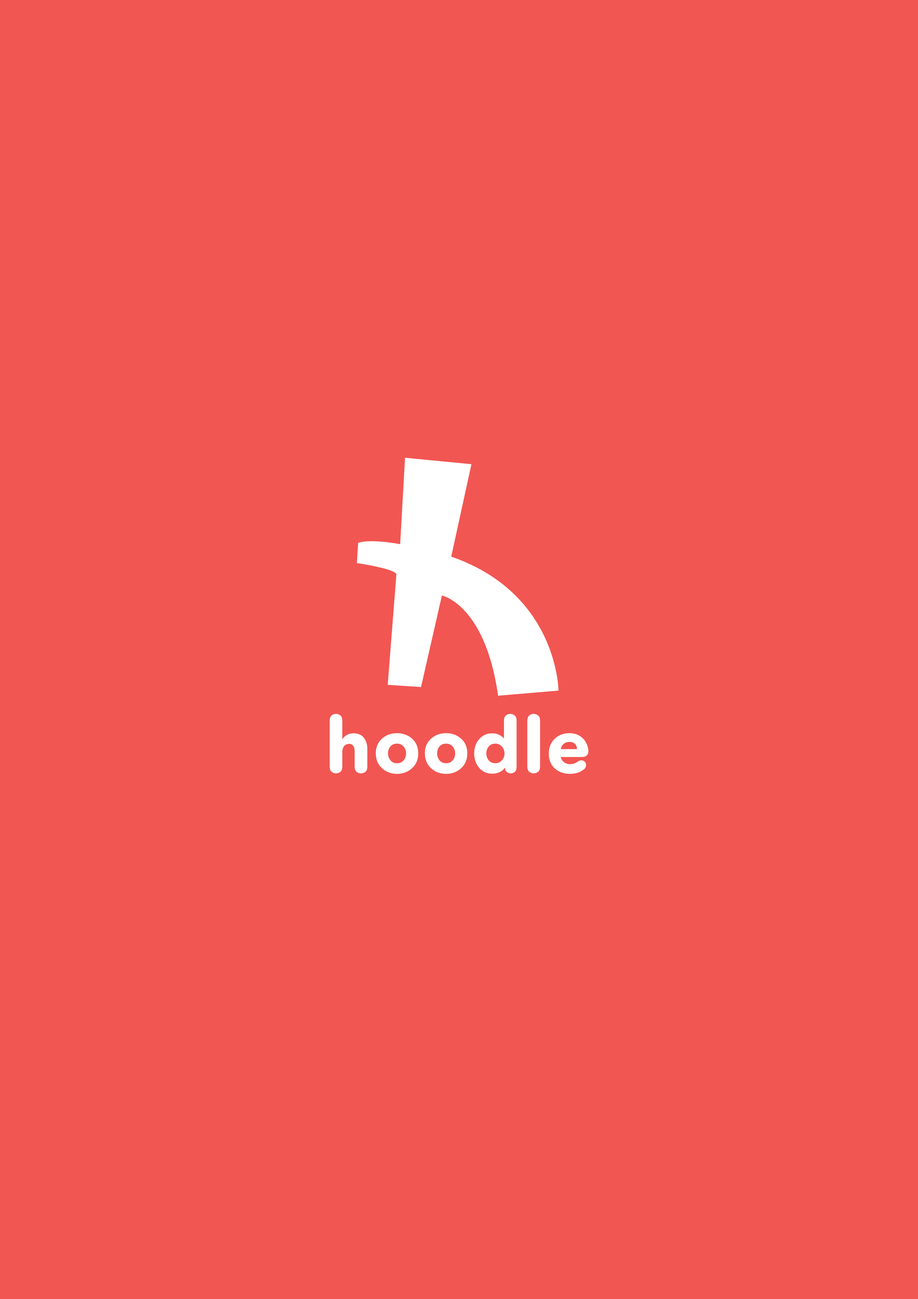
<style>
.page{position:relative;width:918px;height:1299px;background:#f25652}
.page>*{position:absolute;margin:0}
.t1{font:76.6px "AvenirNextRoundedStd-Bold";letter-spacing:0.01em;color:#ffffff}
</style>
<div class="page">
<p class="t1" style="left:330px;top:713px;width:259px;height:61px">hoodle</p>
</div>
